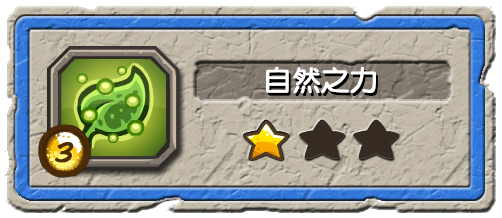
<style>
.page{position:relative;width:502px;height:218px}
.page>*{position:absolute;margin:0}
.t1{font:28px "DFYuanW7-GBK";color:#ffffff;font-weight:bold}
.t2{font:28px "DFYuanW7-GBK";font-weight:bold}
.t3{font:28px "ComicBook";color:#4e2b07;font-weight:bold}
</style>
<div class="page">
<p class="t1" style="left:266px;top:66px;width:110px;height:28px">自然之力</p>
<p class="t2" style="left:268px;top:69px;width:110px;height:28px">自然之力</p>
<p class="t3" style="left:55px;top:142px;width:19px;height:21px">3</p>
</div>
